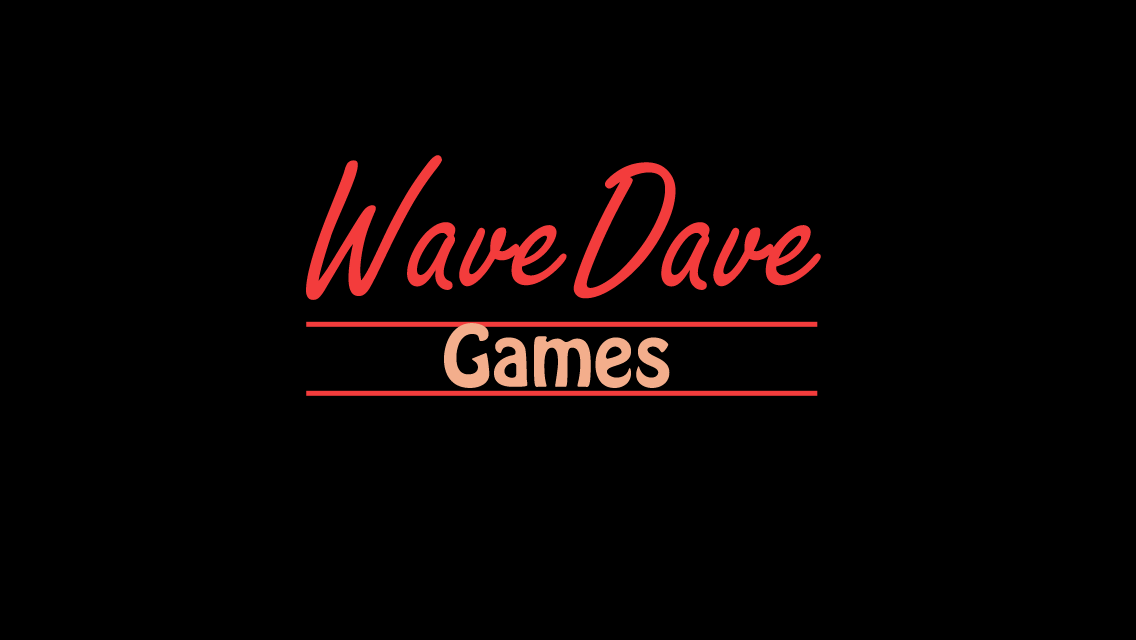
<style>
.page{position:relative;width:1136px;height:640px;background:#000000}
.page>*{position:absolute;margin:0}
.t1{font:200px "FreestyleScript-Regular";color:#f33c3c}
.t2{font:75px "HoboStd";color:#f3ae8c}
</style>
<div class="page">
<p class="t1" style="left:306px;top:155px;width:515px;height:145px">WaveDave</p>
<p class="t2" style="left:444px;top:323px;width:226px;height:65px">Games</p>
</div>
